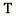
<style>
.page{position:relative;width:16px;height:16px;background:#f9f9f5}
.page>*{position:absolute;margin:0}
.t1{font:15px "Vollkorn-Regular";color:#000000;font-weight:bold}
</style>
<div class="page">
<p class="t1" style="left:3px;top:2px;width:9px;height:12px">T</p>
</div>
